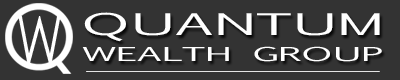
<style>
.page{position:relative;width:400px;height:80px;background:#333333}
.page>*{position:absolute;margin:0}
.t1{font:71.3px "CenturyGothic";letter-spacing:0.075em;color:#ffffff;scale:0.69 1}
.t2{font:18.4px/26.2px "EuphemiaCAS";color:#ffffff;scale:2.14 1}
.t3{font:28.4px/26.2px "EuphemiaCAS";letter-spacing:0.01em;color:#ffffff;scale:2.14 1}
</style>
<div class="page">
<p class="t1" style="left:18px;top:16px;width:43px;height:51px">W</p>
<p class="t2" style="left:82px;top:12px;width:300px;height:50px;text-align:center"><span class="t3">QUANTUM<br></span>WEALTH GROUP</p>
</div>
